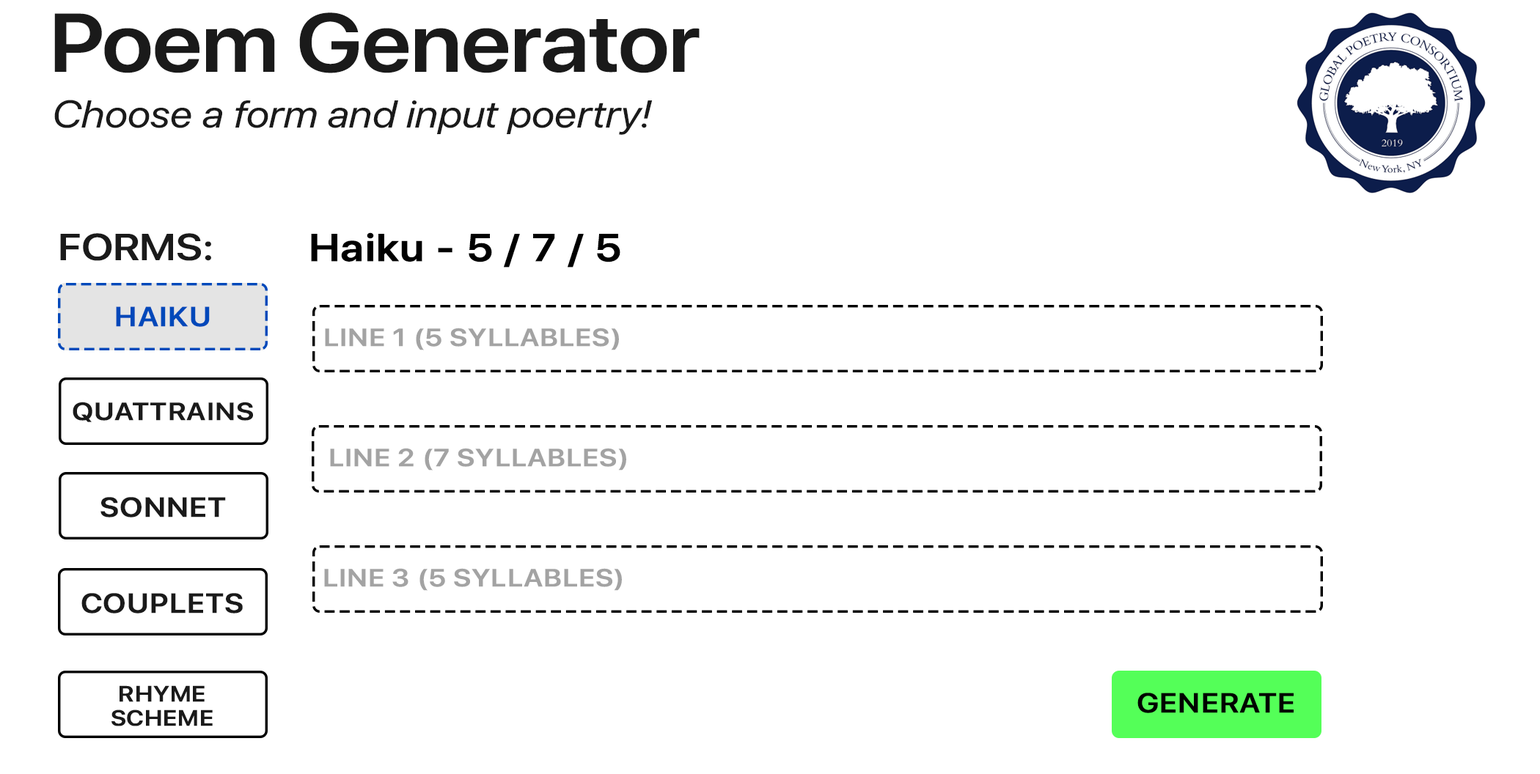
<style>
.page{position:relative;width:1540px;height:774px;background:#ffffff}
.page>*{position:absolute;margin:0}
.t1{font:82.5px "SFProDisplay-Semibold";letter-spacing:-0.005em;color:#1a1a1a;scale:1.11 1}
.t2{font:38.5px "SFProDisplay-RegularItalic";color:#1a1a1a;scale:1.11 1}
.t3{font:37.6px "SFProDisplay-Semibold";color:#1a1a1a;scale:1.14 1}
.t4{font:38.5px "SFProDisplay-Semibold";letter-spacing:0.025em;color:#000000;font-weight:bold;scale:1.11 1}
.t5{font:27.5px "SFProDisplay-Semibold";letter-spacing:0.025em;color:#0048ba;font-weight:bold;scale:1.11 1}
.t6{font:24.7px "SFProDisplay-Semibold";letter-spacing:0.025em;color:#a3a3a3;font-weight:bold;scale:1.14 1}
.t7{font:24.7px "SFProDisplay-Semibold";letter-spacing:0.025em;color:#1a1a1a;font-weight:bold;scale:1.14 1}
.t8{font:27.5px "SFProDisplay-Semibold";letter-spacing:0.025em;color:#1a1a1a;font-weight:bold;scale:1.11 1}
.t9{font:22px/24.4px "SFProDisplay-Semibold";letter-spacing:0.025em;color:#1a1a1a;font-weight:bold;scale:1.11 1}
.t10{font:27.5px "SFProDisplay-Semibold";letter-spacing:0.025em;color:#000000;font-weight:bold;scale:1.11 1}
</style>
<div class="page">
<p class="t1" style="left:54px;top:12px;width:646px;height:61px">Poem Generator</p>
<p class="t2" style="left:54px;top:100px;width:599px;height:35px">Choose a form and input poertry!</p>
<p class="t3" style="left:60px;top:233px;width:151px;height:28px">FORMS:</p>
<p class="t4" style="left:311px;top:232px;width:309px;height:36px">Haiku - 5 / 7 / 5</p>
<p class="t5" style="left:116px;top:307px;width:94px;height:20px">HAIKU</p>
<p class="t6" style="left:325px;top:328px;width:294px;height:23px">LINE 1 (5 SYLLABLES)</p>
<p class="t7" style="left:73px;top:402px;width:180px;height:20px">QUATTRAINS</p>
<p class="t6" style="left:330px;top:448px;width:296px;height:23px">LINE 2 (7 SYLLABLES)</p>
<p class="t8" style="left:100px;top:497px;width:126px;height:21px">SONNET</p>
<p class="t6" style="left:324px;top:568px;width:298px;height:23px">LINE 3 (5 SYLLABLES)</p>
<p class="t8" style="left:81px;top:593px;width:162px;height:21px">COUPLETS</p>
<p class="t9" style="left:111px;top:686px;width:102px;height:41px;text-align:center">RHYME <br>SCHEME</p>
<p class="t10" style="left:1137px;top:693px;width:157px;height:20px">GENERATE</p>
</div>
